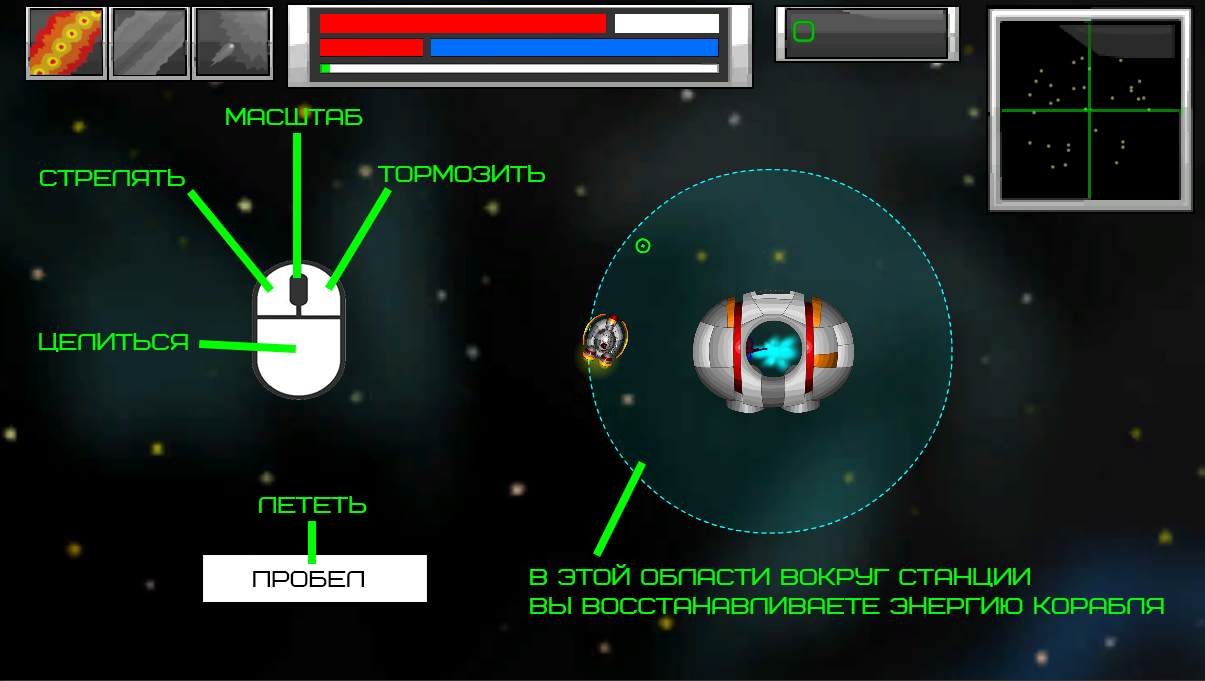
<style>
.page{position:relative;width:1205px;height:681px}
.page>*{position:absolute;margin:0}
.t1{font:24px "Bicubik";color:#00ff00}
.t2{font:24px "Bicubik";color:#000000}
</style>
<div class="page">
<p class="t1" style="left:226px;top:108px;width:137px;height:17px">Масштаб</p>
<p class="t1" style="left:40px;top:169px;width:145px;height:17px">Стрелять</p>
<p class="t1" style="left:378px;top:165px;width:167px;height:17px">тормозить</p>
<p class="t1" style="left:39px;top:333px;width:149px;height:19px">Целиться</p>
<p class="t1" style="left:259px;top:496px;width:108px;height:17px">Лететь</p>
<p class="t1" style="left:530px;top:564px;width:634px;height:50px">В этой области вокруг станции <br>вы восстанавливаете энергию корабля</p>
<p class="t2" style="left:253px;top:571px;width:111px;height:16px">ПРОБЕЛ</p>
</div>
